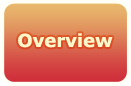
<style>
.page{position:relative;width:131px;height:86px}
.page>*{position:absolute;margin:0}
.t1{font:18px "Verdana-Bold";color:#fef7ca}
</style>
<div class="page">
<p class="t1" style="left:18px;top:33px;width:95px;height:15px">Overview</p>
</div>
